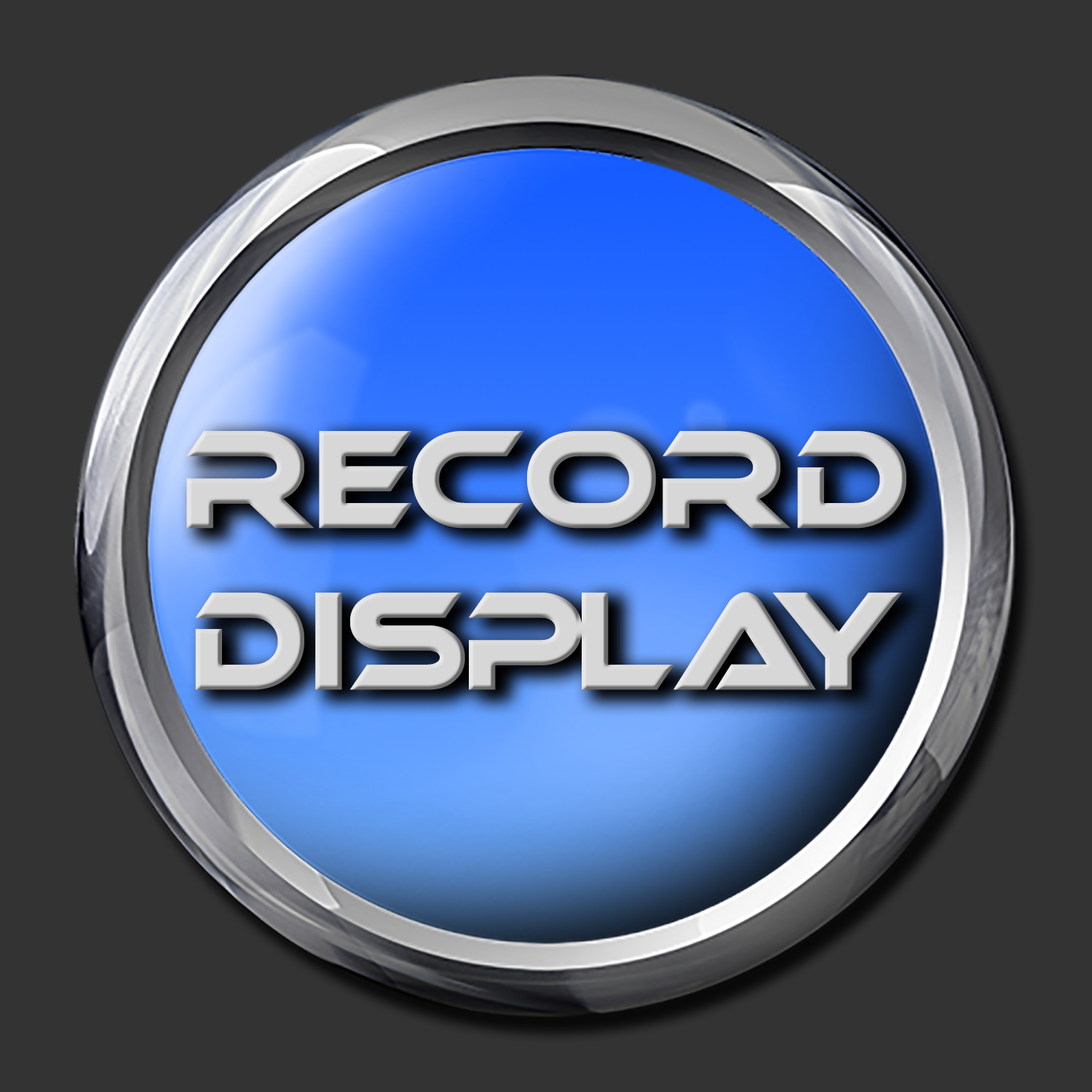
<style>
.page{position:relative;width:1092px;height:1092px;background:#333333}
.page>*{position:absolute;margin:0}
.t1{font:134.6px "Ethnocentric";color:#d7d7d7;scale:0.88 1}
</style>
<div class="page">
<p class="t1" style="left:186px;top:431px;width:720px;height:259px;text-align:center">Record<br>Display</p>
</div>
